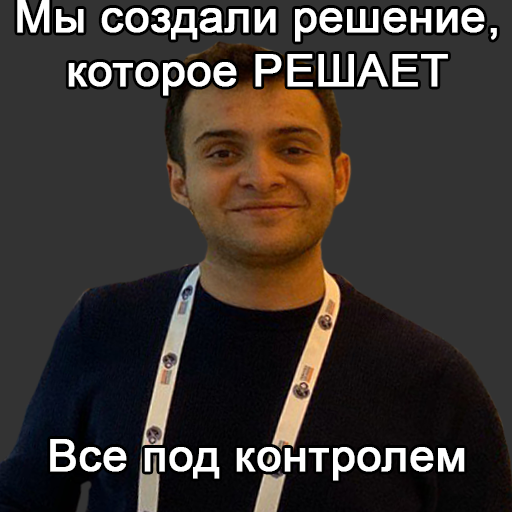
<style>
.page{position:relative;width:512px;height:512px;background:#333333}
.page>*{position:absolute;margin:0}
.t1{font:45px "ArialMT";color:#ffffff;font-weight:bold}
</style>
<div class="page">
<p class="t1" style="left:17px;top:0px;width:480px;height:96px;text-align:center">Мы создали решение,<br>которое РЕШАЕТ</p>
<p class="t1" style="left:50px;top:439px;width:415px;height:42px">Все под контролем</p>
</div>
